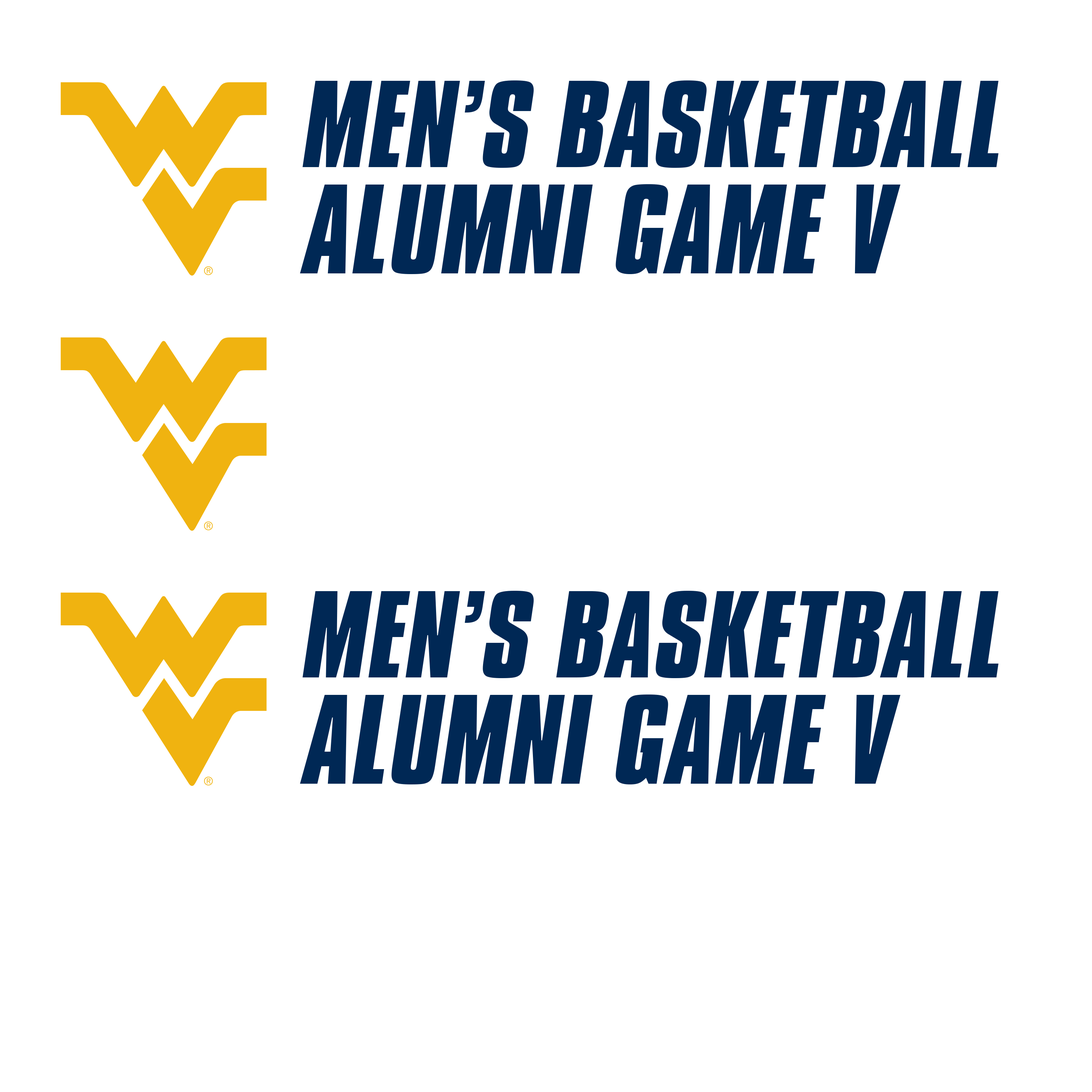
<style>
.page{position:relative;width:1092px;height:1092px;background:#ffffff}
.page>*{position:absolute;margin:0}
.t1{font:106.2px "CompactaBT-BoldItalic";letter-spacing:0.01em;color:#002855}
.t2{font:109.2px/106.2px "CompactaBT-BoldItalic";letter-spacing:0.01em;color:#002855}
</style>
<div class="page">
<p class="t1" style="left:300px;top:80px;width:698px;height:194px">MEN’S BASKETBALL<br><span class="t2">ALUMNI GAME V</span></p>
<p class="t1" style="left:300px;top:591px;width:698px;height:193px">MEN’S BASKETBALL<br><span class="t2">ALUMNI GAME V</span></p>
</div>
